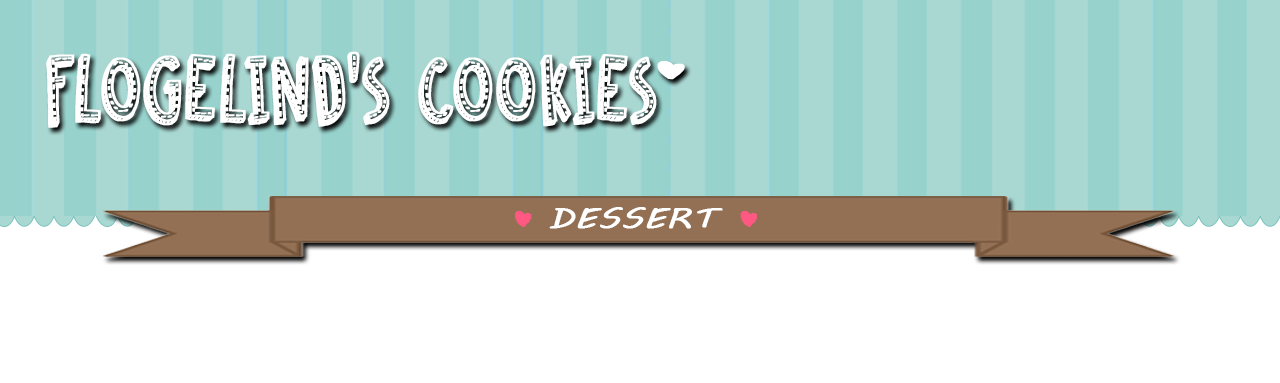
<style>
.page{position:relative;width:1280px;height:383px;background:#ffffff}
.page>*{position:absolute;margin:0}
.t1{font:84.5px "DKCosmoStitch";color:#ffffff;font-weight:bold;scale:0.87 1}
.t2{font:28.4px "MVBoli";color:#ffffff;font-weight:bold;scale:1.27 1}
</style>
<div class="page">
<p class="t1" style="left:46px;top:51px;width:611px;height:77px">FLOGELIND’S COOKIES</p>
<p class="t2" style="left:549px;top:207px;width:174px;height:22px">DESSERT</p>
</div>
